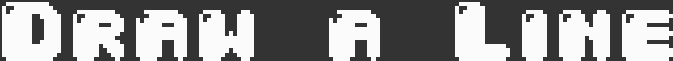
<style>
.page{position:relative;width:673px;height:61px;background:#333333}
.page>*{position:absolute;margin:0}
.t1{font:72px "04b30";letter-spacing:0.05em;color:#fbfbfb}
</style>
<div class="page">
<p class="t1" style="left:2px;top:2px;width:671px;height:59px">Draw a Line</p>
</div>
